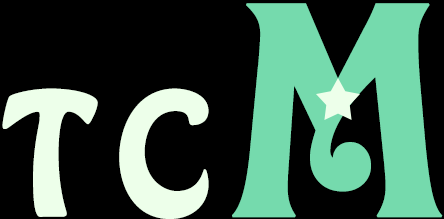
<style>
.page{position:relative;width:444px;height:219px;background:#000000}
.page>*{position:absolute;margin:0}
.t1{font:150px "HoboStd";letter-spacing:0.1em;color:#edffea;font-weight:bold}
.t2{font:300px "UTM-Davida";letter-spacing:0.1em;color:#75daad;font-weight:bold}
</style>
<div class="page">
<p class="t1" style="left:2px;top:3px;width:441px;height:216px">TC<span class="t2">M</span></p>
</div>
